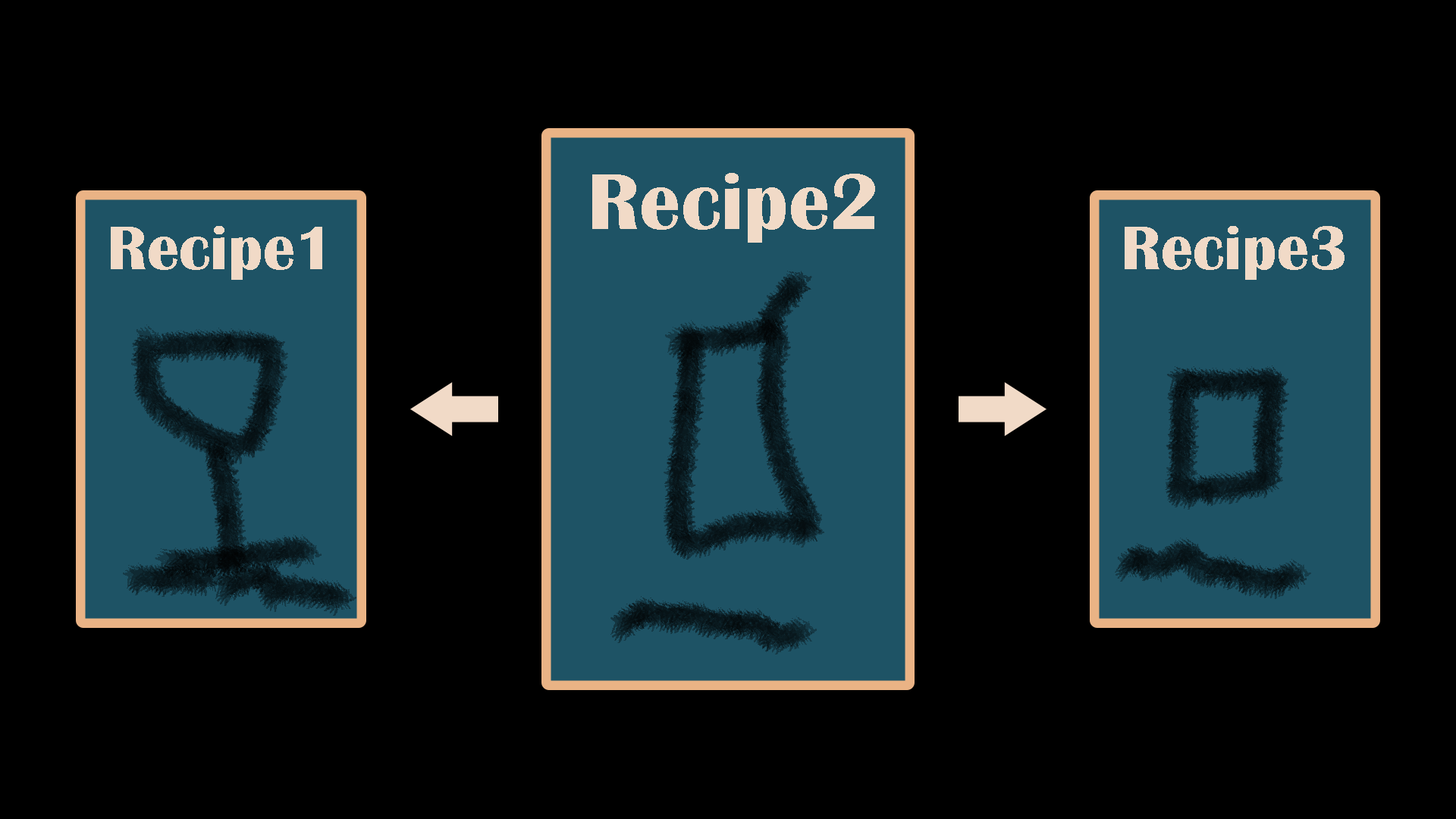
<style>
.page{position:relative;width:1456px;height:819px;background:#000000}
.page>*{position:absolute;margin:0}
.t1{font:82.2px "BritannicBold";color:#f1dac7}
.t2{font:64px "BritannicBold";color:#f1dac7}
</style>
<div class="page">
<p class="t1" style="left:592px;top:173px;width:283px;height:70px">Recipe2</p>
<p class="t2" style="left:111px;top:226px;width:211px;height:54px">Recipe1</p>
<p class="t2" style="left:1125px;top:226px;width:220px;height:54px">Recipe3</p>
</div>
